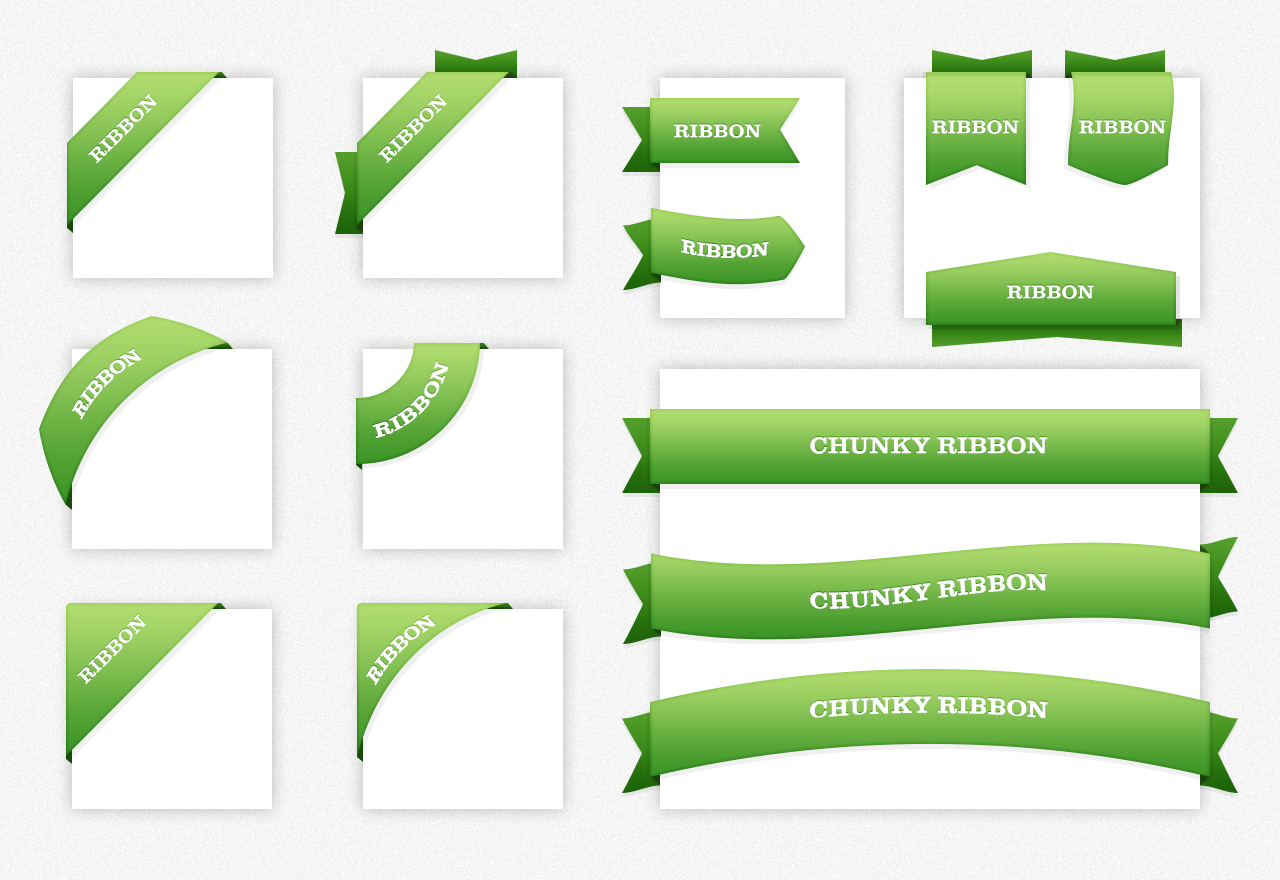
<style>
.page{position:relative;width:1280px;height:880px;background:#ffffff}
.page>*{position:absolute;margin:0}
.t1{font:19px "Clarendon";color:#ffffff;text-transform:uppercase}
.t2{font:24px "Clarendon";color:#ffffff;text-transform:uppercase}
</style>
<div class="page">
<p class="t1" style="left:88px;top:93px;width:69px;height:71px;rotate:-45deg">Ribbon</p>
<p class="t1" style="left:378px;top:93px;width:69px;height:71px;rotate:-45deg">Ribbon</p>
<p class="t1" style="left:674px;top:124px;width:87px;height:14px">Ribbon</p>
<p class="t1" style="left:932px;top:120px;width:87px;height:14px">Ribbon</p>
<p class="t1" style="left:1079px;top:120px;width:87px;height:14px">Ribbon</p>
<p class="t1" style="left:681px;top:239px;width:88px;height:19px;rotate:2deg">Ribbon</p>
<p class="t1" style="left:1007px;top:285px;width:87px;height:14px">Ribbon</p>
<p class="t1" style="left:72px;top:349px;width:70px;height:71px;rotate:-45deg">Ribbon</p>
<p class="t1" style="left:372px;top:361px;width:77px;height:77px;rotate:-45deg">Ribbon</p>
<p class="t2" style="left:810px;top:436px;width:237px;height:18px">Chunky Ribbon</p>
<p class="t2" style="left:810px;top:573px;width:237px;height:36px;rotate:-4deg">Chunky Ribbon</p>
<p class="t1" style="left:77px;top:614px;width:69px;height:71px;rotate:-45deg">Ribbon</p>
<p class="t1" style="left:366px;top:614px;width:70px;height:72px;rotate:-45deg">Ribbon</p>
<p class="t2" style="left:810px;top:696px;width:238px;height:23px">Chunky Ribbon</p>
</div>
